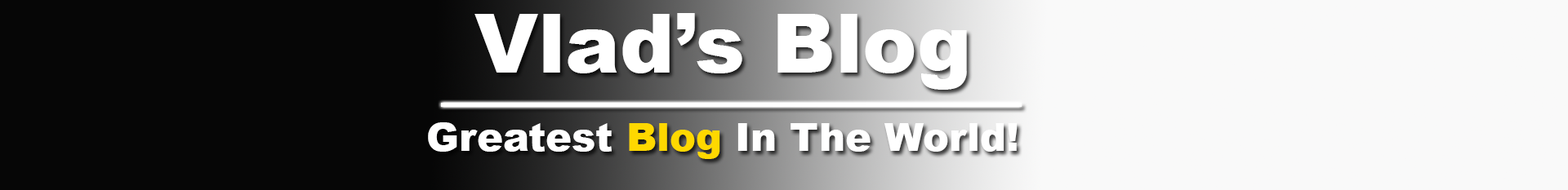
<style>
.page{position:relative;width:1568px;height:190px;background:#f9f9f9}
.page>*{position:absolute;margin:0}
.t1{font:81.7px "Arial-Black";color:#ffffff}
.t2{font:39.2px "Arial-Black";color:#ffffff}
.t3{font:39.2px "Arial-Black";color:#ffd800}
</style>
<div class="page">
<p class="t1" style="left:474px;top:13px;width:493px;height:77px">Vlad’s Blog</p>
<p class="t2" style="left:428px;top:122px;width:590px;height:37px">Greatest <span class="t3">Blog</span> In The World!</p>
</div>
